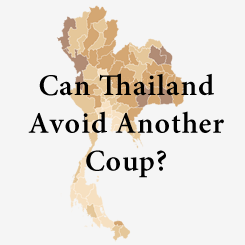
<style>
.page{position:relative;width:245px;height:245px;background:#f5f5f5}
.page>*{position:absolute;margin:0}
.t1{font:29.8px/37.8px "MinionPro-Semibold";letter-spacing:0.025em;color:#000000}
</style>
<div class="page">
<p class="t1" style="left:28px;top:73px;width:196px;height:105px;text-align:center">Can Thailand Avoid Another Coup?</p>
</div>
